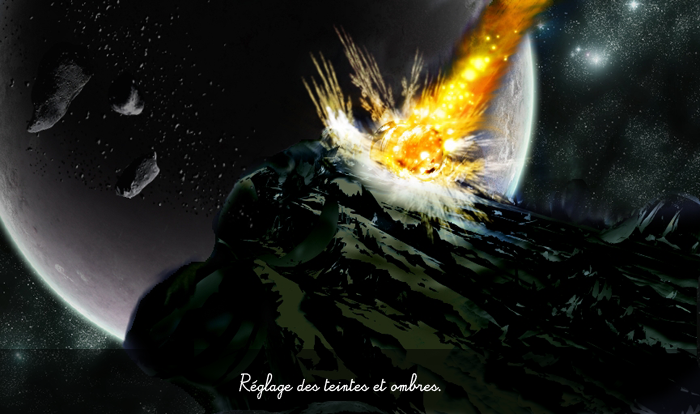
<style>
.page{position:relative;width:700px;height:414px}
.page>*{position:absolute;margin:0}
.t1{font:12px/20.5px "Alamain";color:#ffffff}
</style>
<div class="page">
<p class="t1" style="left:239px;top:373px;width:202px;height:27px">Réglage des teintes et ombres.</p>
</div>
